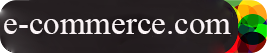
<style>
.page{position:relative;width:267px;height:53px}
.page>*{position:absolute;margin:0}
.t1{font:33px "TimesNewRomanPSMT";color:#faf3f5}
</style>
<div class="page">
<p class="t1" style="left:4px;top:19px;width:227px;height:15px">e-commerce.com</p>
</div>
